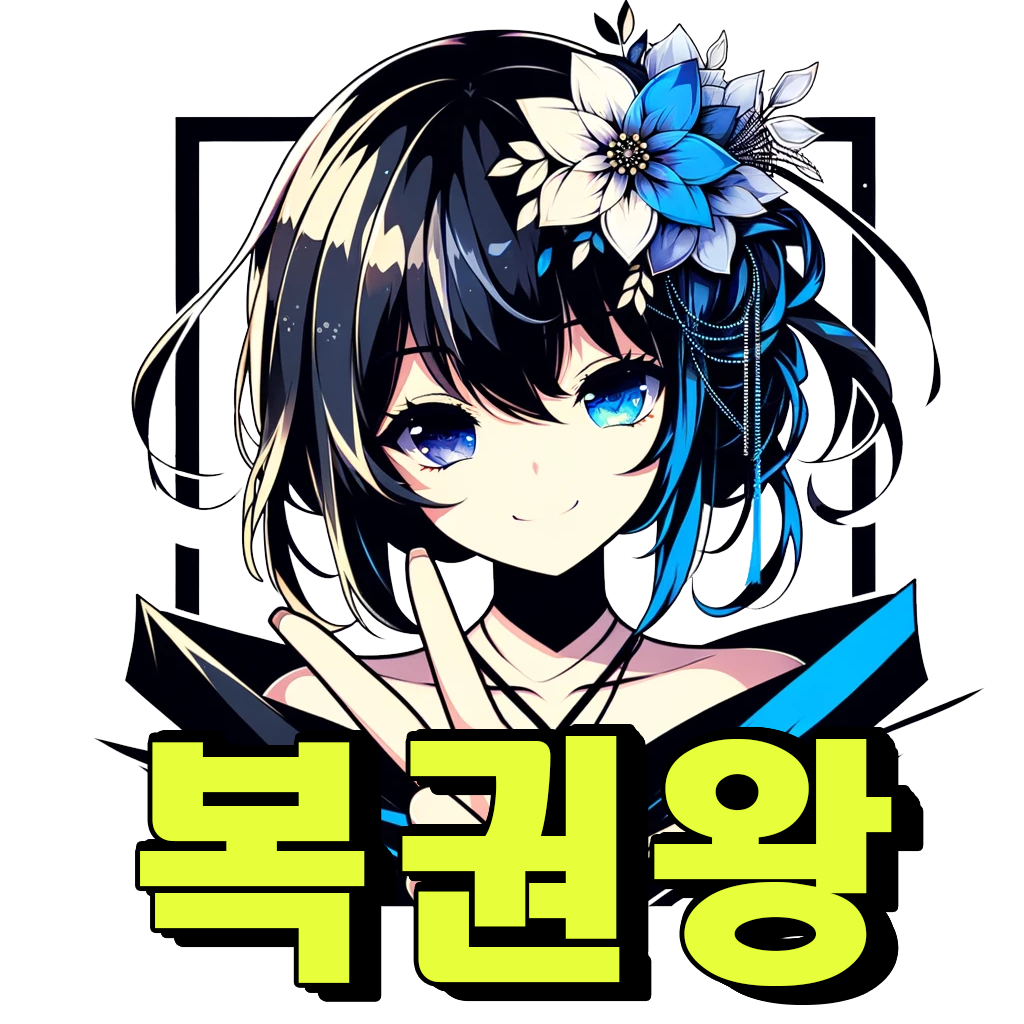
<style>
.page{position:relative;width:1024px;height:1024px;background:#ffffff}
.page>*{position:absolute;margin:0}
.t1{font:257.2px "HeadlineR-HM";color:#e6ff3a}
</style>
<div class="page">
<p class="t1" style="left:140px;top:736px;width:752px;height:250px">복권왕</p>
</div>
